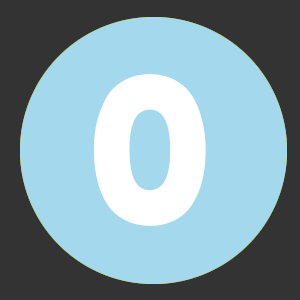
<style>
.page{position:relative;width:300px;height:300px;background:#a3d8ed}
.page>*{position:absolute;margin:0}
.t1{font:200px "FredokaOne-Regular";color:#ffffff}
</style>
<div class="page">
<p class="t1" style="left:94px;top:74px;width:112px;height:152px">0</p>
</div>
